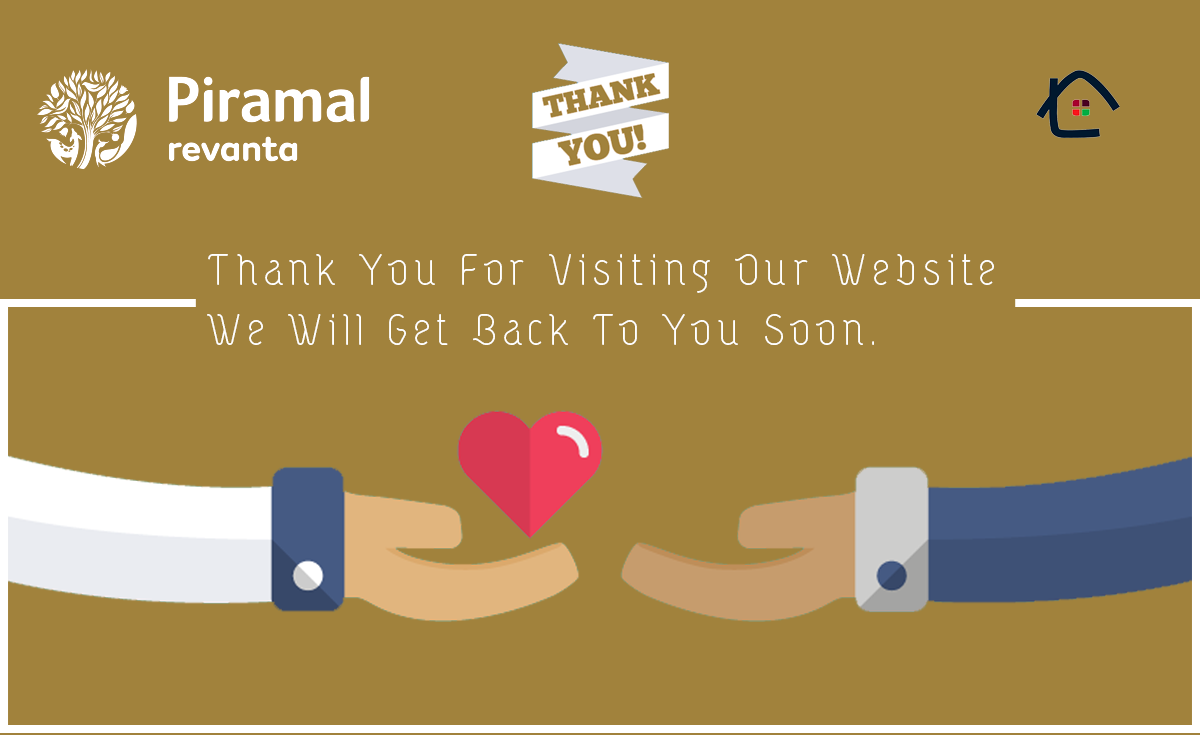
<style>
.page{position:relative;width:1200px;height:735px;background:#a1823c}
.page>*{position:absolute;margin:0}
.t1{font:50px "Vetka";letter-spacing:0.1em;color:#ffffff}
</style>
<div class="page">
<p class="t1" style="left:207px;top:254px;width:787px;height:91px">Thank You For Visiting Our Website<br>We Will Get Back To You Soon.</p>
</div>
